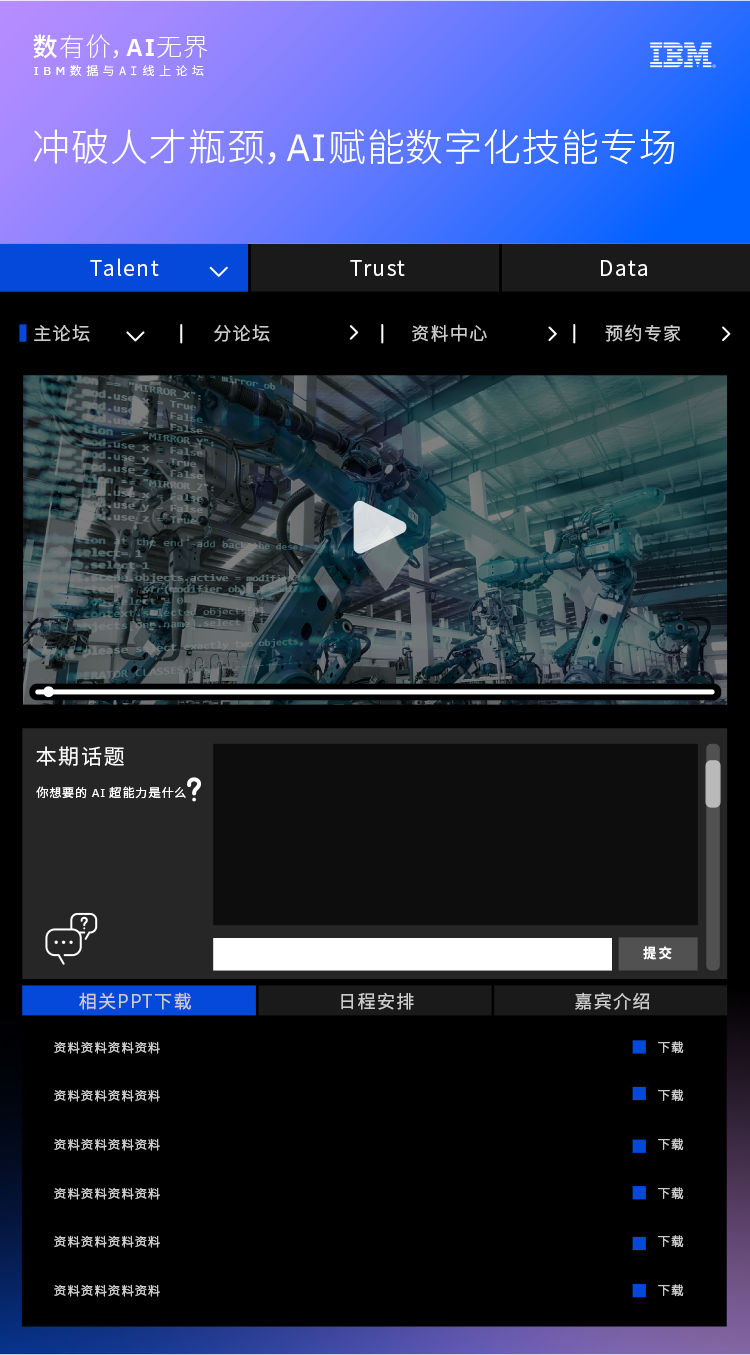
<style>
.page{position:relative;width:750px;height:1355px;background:#000000}
.page>*{position:absolute;margin:0}
.t1{font:25.3px "NotoSansCJKsc-Thin";letter-spacing:0.05em;color:#ffffff}
.t2{font:25.3px "NotoSansCJKsc-Medium";letter-spacing:0.05em;color:#ffffff}
.t3{font:25.3px "NotoSansCJKsc-Light";letter-spacing:0.05em;color:#ffffff}
.t4{font:25.3px "IBMPlexSans-SemiBold";letter-spacing:0.05em;color:#ffffff}
.t5{font:12px "NotoSansCJKsc-Light";letter-spacing:0.37em;color:#ffffff}
.t6{font:12px "IBMPlexSans-Medium";letter-spacing:0.37em;color:#ffffff}
.t7{font:12px "IBMPlexMono-Light";letter-spacing:0.37em;color:#ffffff}
.t8{font:38px "NotoSansCJKsc-Light";letter-spacing:0.025em;color:#ffffff}
.t9{font:38px "IBMPlexSans";letter-spacing:0.025em;color:#ffffff}
.t10{font:21px "NotoSansCJKsc-DemiLight";letter-spacing:0.075em;color:#ffffff}
.t11{font:18px "NotoSansCJKsc-DemiLight";letter-spacing:0.075em;color:#cccccc}
.t12{font:12px "NotoSansCJKsc-DemiLight";letter-spacing:0.075em;color:#ffffff}
.t13{font:12px "IBMPlexSans";letter-spacing:0.075em;color:#ffffff}
.t14{font:13.4px "NotoSansCJKsc-Bold";letter-spacing:-0.02em;color:#ffffff}
.t15{font:12.5px "NotoSansCJKsc-DemiLight";letter-spacing:0.075em;color:#cccccc}
</style>
<div class="page">
<p class="t1" style="left:33px;top:34px;width:175px;height:25px"><span class="t2">数</span>有价<span class="t3">，</span><span class="t4">AI</span>无界</p>
<p class="t5" style="left:34px;top:65px;width:170px;height:12px"><span class="t6">IBM</span>数据与<span class="t7">AI</span>线上论坛</p>
<p class="t8" style="left:33px;top:128px;width:642px;height:37px">冲破人才瓶颈，<span class="t9">AI</span>赋能数字化技能专场</p>
<p class="t10" style="left:90px;top:258px;width:69px;height:18px">Talent</p>
<p class="t10" style="left:350px;top:260px;width:55px;height:16px">Trust</p>
<p class="t10" style="left:601px;top:260px;width:46px;height:16px">Data</p>
<p class="t11" style="left:34px;top:324px;width:56px;height:18px">主论坛</p>
<p class="t11" style="left:214px;top:324px;width:56px;height:18px">分论坛</p>
<p class="t11" style="left:412px;top:324px;width:75px;height:18px">资料中心</p>
<p class="t11" style="left:605px;top:324px;width:76px;height:18px">预约专家</p>
<p class="t10" style="left:36px;top:746px;width:88px;height:20px">本期话题</p>
<p class="t12" style="left:36px;top:786px;width:150px;height:13px">你想要的 <span class="t13">AI </span>超能力是什么</p>
<p class="t14" style="left:643px;top:946px;width:29px;height:14px">提 交</p>
<p class="t11" style="left:79px;top:992px;width:112px;height:18px">相关PPT下载</p>
<p class="t11" style="left:341px;top:992px;width:73px;height:18px">日程安排</p>
<p class="t11" style="left:575px;top:992px;width:75px;height:18px">嘉宾介绍</p>
<p class="t15" style="left:54px;top:1041px;width:106px;height:13px">资料资料资料资料</p>
<p class="t15" style="left:658px;top:1041px;width:26px;height:13px">下载</p>
<p class="t15" style="left:54px;top:1089px;width:106px;height:13px">资料资料资料资料</p>
<p class="t15" style="left:658px;top:1089px;width:26px;height:13px">下载</p>
<p class="t15" style="left:54px;top:1138px;width:106px;height:13px">资料资料资料资料</p>
<p class="t15" style="left:658px;top:1138px;width:26px;height:13px">下载</p>
<p class="t15" style="left:54px;top:1187px;width:106px;height:13px">资料资料资料资料</p>
<p class="t15" style="left:658px;top:1187px;width:26px;height:13px">下载</p>
<p class="t15" style="left:54px;top:1235px;width:106px;height:13px">资料资料资料资料</p>
<p class="t15" style="left:658px;top:1235px;width:26px;height:13px">下载</p>
<p class="t15" style="left:54px;top:1284px;width:106px;height:13px">资料资料资料资料</p>
<p class="t15" style="left:658px;top:1284px;width:26px;height:13px">下载</p>
</div>
